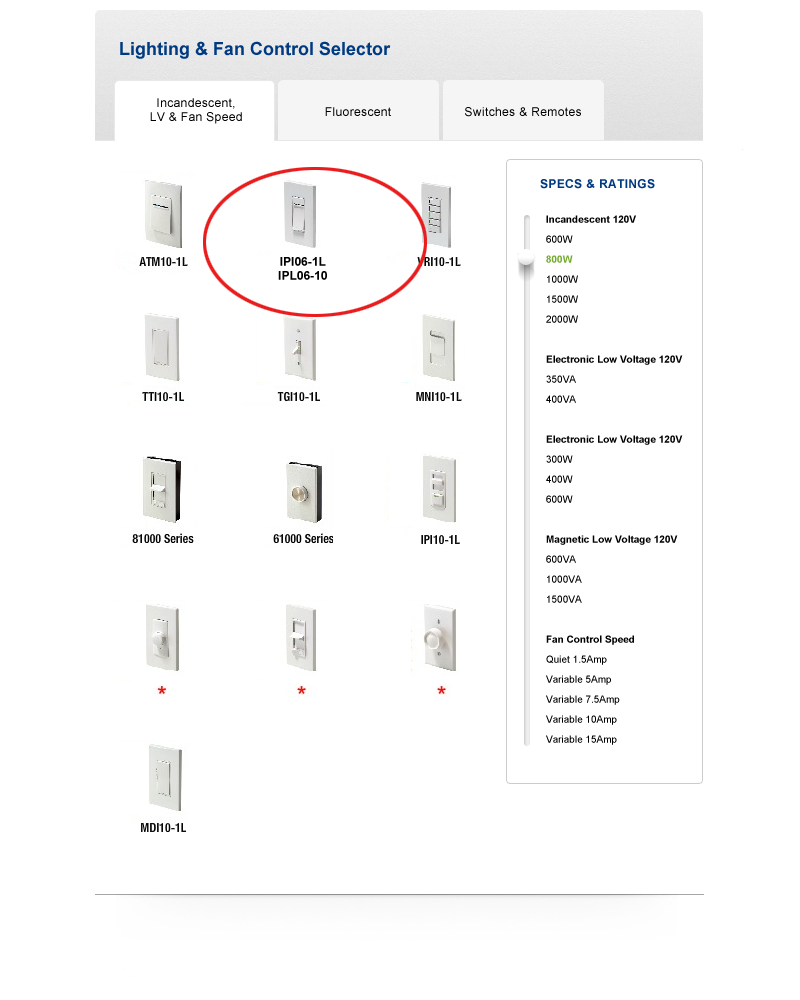
<style>
.page{position:relative;width:800px;height:1000px;background:#ffffff}
.page>*{position:absolute;margin:0}
.t1{font:18px "Arial-BoldMT";color:#003a81}
.t2{font:12px/14px "ArialMT";letter-spacing:0.03em;color:#000000}
.t3{font:12px "ArialMT";letter-spacing:0.03em;color:#000000}
.t4{font:12px "Arial-BoldMT";letter-spacing:0.03em;color:#003a81;text-transform:uppercase}
.t5{font:10px/20px "ArialMT";color:#000000}
.t6{font:10px/20px "Arial-BoldMT";color:#000000}
.t7{font:10px/20px "Arial-BoldMT";color:#75ab2e}
.t8{font:12px/14px "Arial-BoldMT";color:#000000}
</style>
<div class="page">
<p class="t1" style="left:120px;top:41px;width:271px;height:18px">Lighting &amp; Fan Control Selector</p>
<p class="t2" style="left:150px;top:98px;width:92px;height:26px;text-align:center">Incandescent,<br>LV &amp; Fan Speed</p>
<p class="t3" style="left:325px;top:107px;width:66px;height:9px">Fluorescent</p>
<p class="t3" style="left:465px;top:107px;width:116px;height:10px">Switches &amp; Remotes</p>
<p class="t4" style="left:540px;top:179px;width:115px;height:10px">Specs &amp; Ratings</p>
<p class="t5" style="left:546px;top:215px;width:137px;height:530px"><span class="t6">Incandescent 120V<br></span>600W<br><span class="t7">800W<br></span>1000W<br>1500W<br>2000W<br><br><span class="t6">Electronic Low Voltage 120V<br></span>350VA<br>400VA<br><br><span class="t6">Electronic Low Voltage 120V<br></span>300W<br>400W<br>600W<br><br><span class="t6">Magnetic Low Voltage 120V<br></span>600VA<br>1000VA<br>1500VA<br><br><span class="t6">Fan Control Speed<br></span>Quiet 1.5Amp<br>Variable 5Amp<br>Variable 7.5Amp<br>Variable 10Amp<br>Variable 15Amp</p>
<p class="t8" style="left:278px;top:257px;width:49px;height:23px;text-align:center">IPI06-1L<br>IPL06-10</p>
</div>
